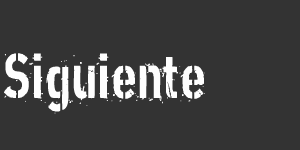
<style>
.page{position:relative;width:300px;height:150px;background:#333333}
.page>*{position:absolute;margin:0}
.t1{font:63px "XXIIARMY";color:#fefefe}
</style>
<div class="page">
<p class="t1" style="left:4px;top:53px;width:201px;height:61px">Siguiente</p>
</div>
